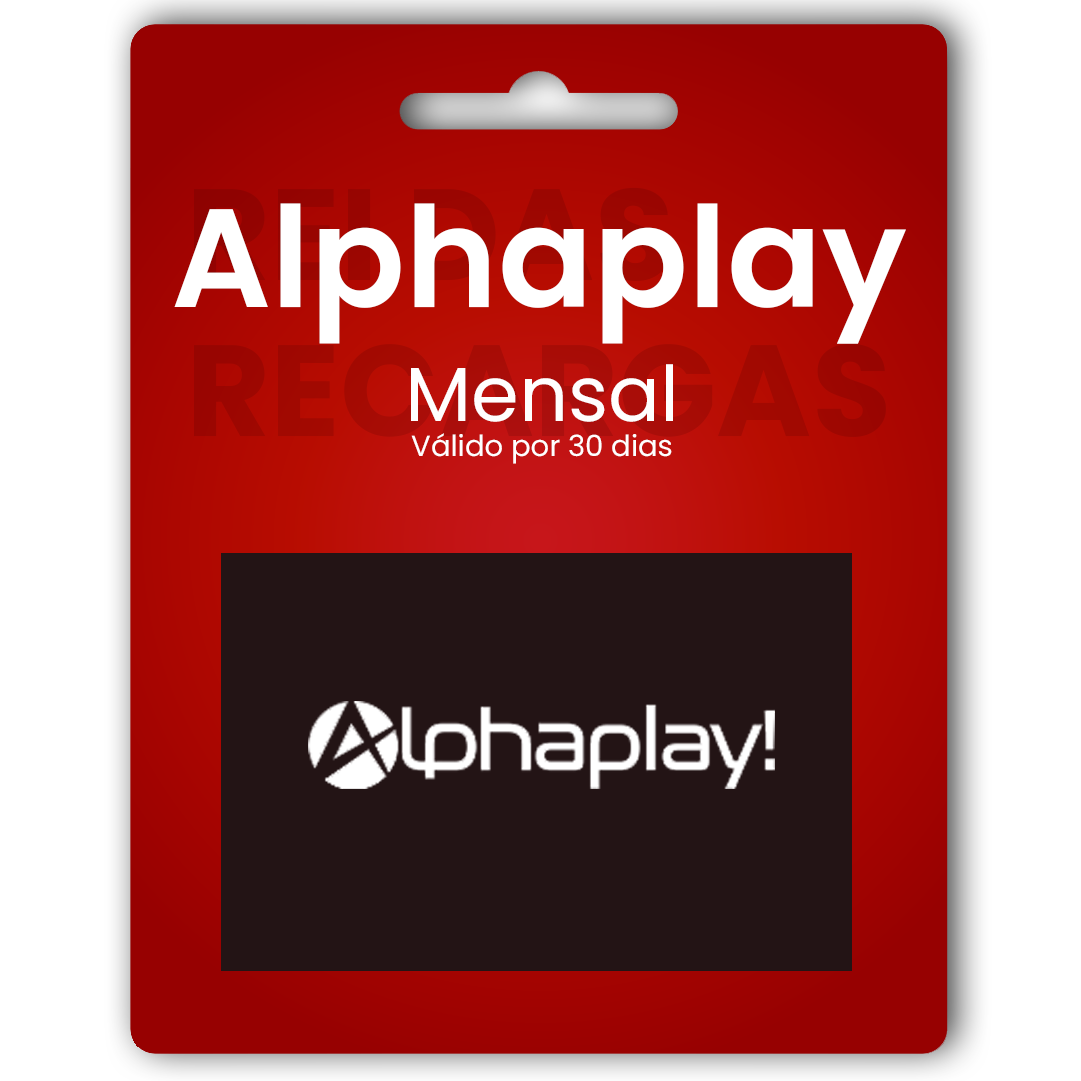
<style>
.page{position:relative;width:1081px;height:1081px;background:#ffffff}
.page>*{position:absolute;margin:0}
.t1{font:139.9px "Poppins-SemiBold";color:#ffffff}
.t2{font:29.1px "Poppins-Regular";color:#fffefe}
.t3{font:76.7px "Poppins-Regular";color:#fffefe}
</style>
<div class="page">
<p class="t1" style="left:174px;top:203px;width:732px;height:141px">Alphaplay</p>
<p class="t2" style="left:411px;top:364px;width:262px;height:100px;text-align:center"><span class="t3">Mensal<br></span>Válido por 30 dias</p>
</div>
